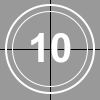
<style>
.page{position:relative;width:100px;height:100px;background:#999999}
.page>*{position:absolute;margin:0}
.t1{font:40px "Arial-BoldMT";color:#ffffff}
</style>
<div class="page">
<p class="t1" style="left:31px;top:33px;width:40px;height:30px">10</p>
</div>
